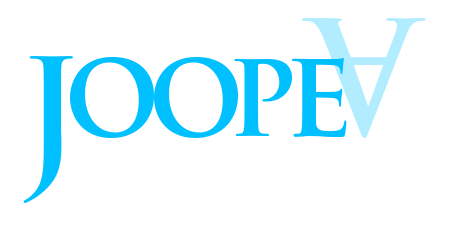
<style>
.page{position:relative;width:454px;height:230px;background:#ffffff}
.page>*{position:absolute;margin:0}
.t1{font:144.9px "TrajanPro-Bold";color:#00c0ff;scale:0.96 1}
.t2{font:120.8px "TrajanPro-Bold";letter-spacing:-0.1em;color:#00c0ff;scale:0.96 1}
</style>
<div class="page">
<p class="t1" style="left:23px;top:56px;width:50px;height:147px">J</p>
<p class="t2" style="left:70px;top:56px;width:277px;height:82px">oope</p>
</div>
